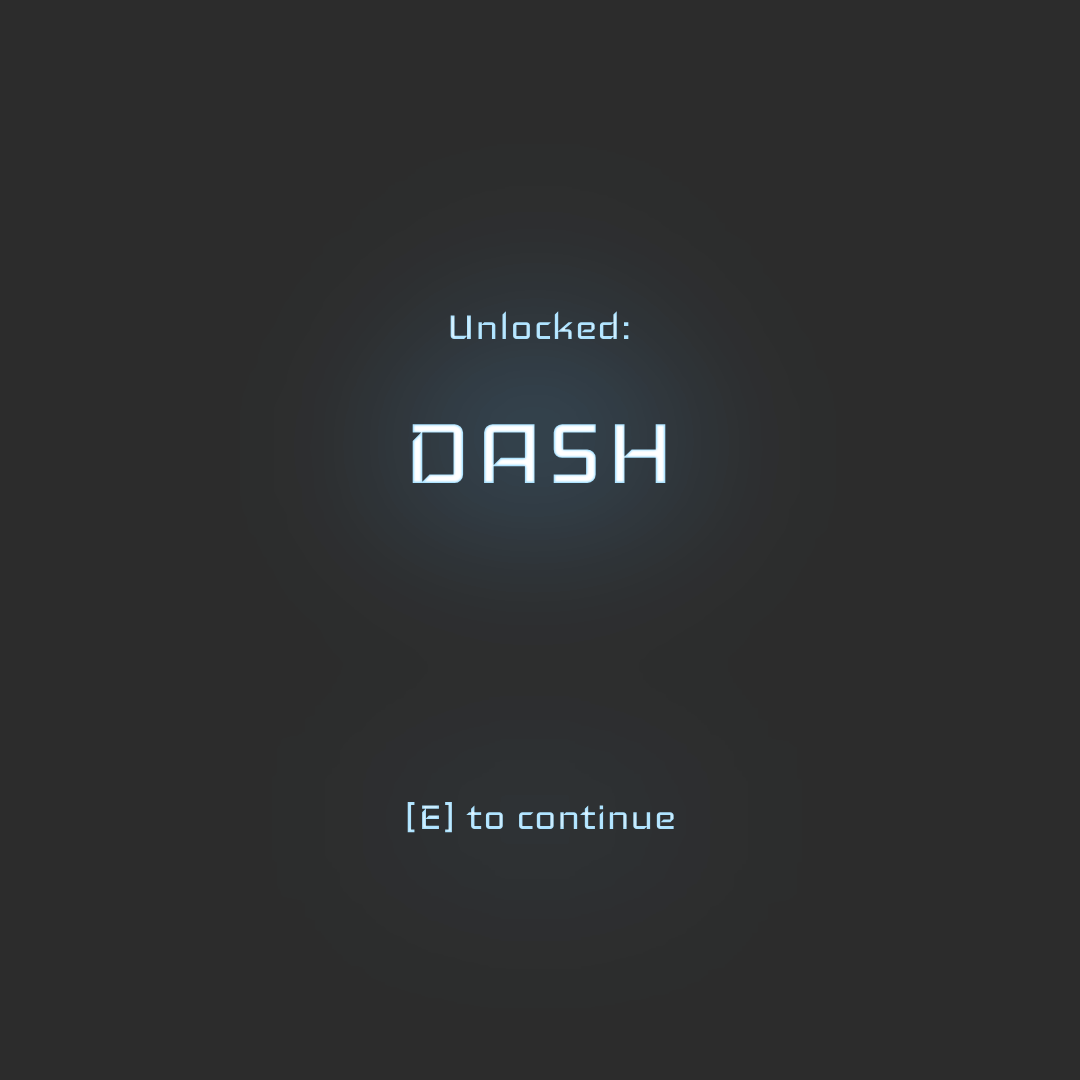
<style>
.page{position:relative;width:1080px;height:1080px;background:#2c2c2c}
.page>*{position:absolute;margin:0}
.t1{font:48px "Iceland-Regular"}
.t2{font:120px "Iceland-Regular"}
</style>
<div class="page">
<p class="t1" style="left:407px;top:311px;width:267px;height:522px;text-align:center">Unlocked:<br><span class="t2">DASH<br><br><br></span>[E] to continue</p>
</div>
